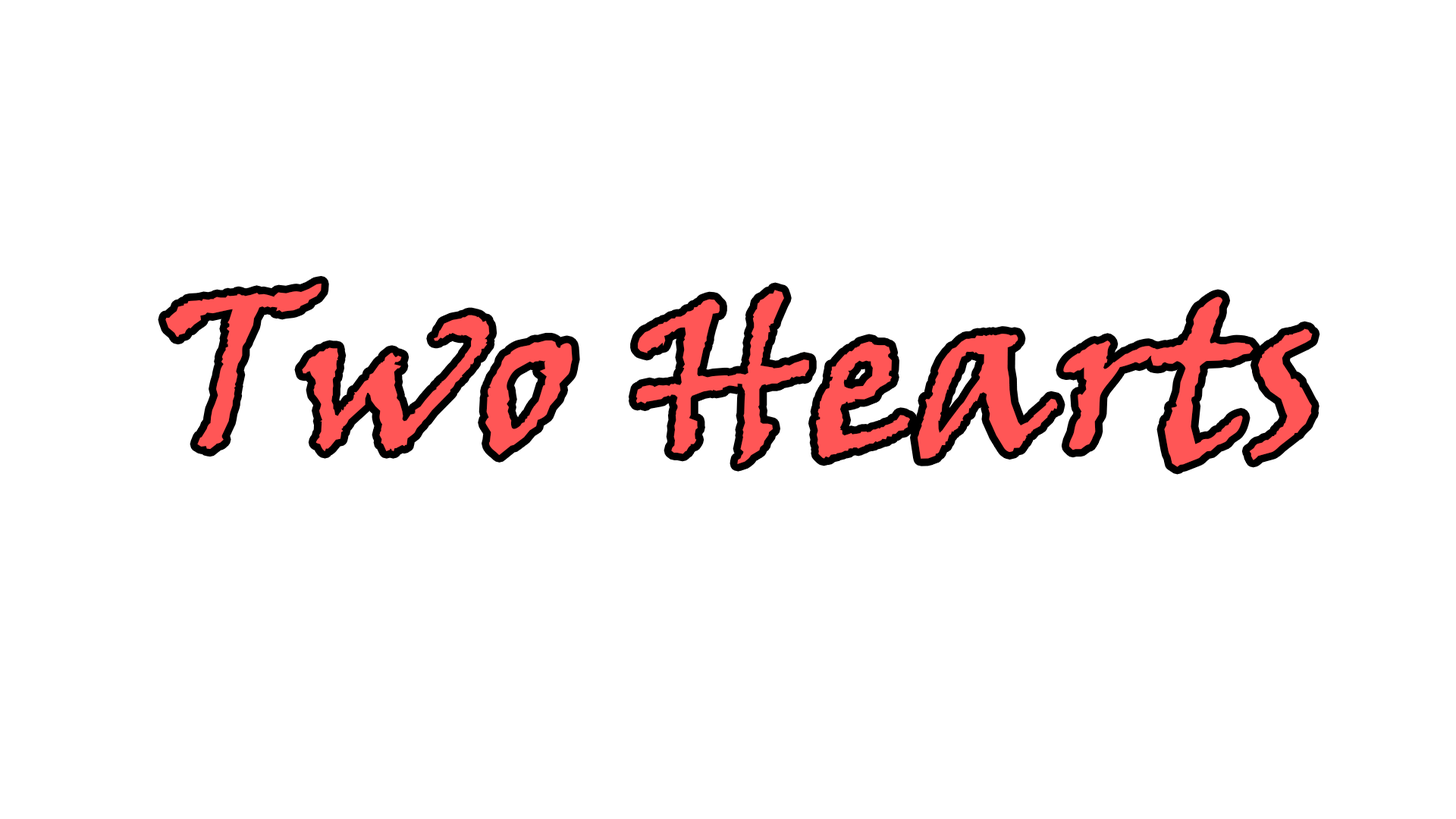
<style>
.page{position:relative;width:1456px;height:819px;background:#ffffff}
.page>*{position:absolute;margin:0}
.t1{font:227.5px "VinerHandITC";color:#ff5656}
</style>
<div class="page">
<p class="t1" style="left:165px;top:283px;width:1148px;height:184px">Two Hearts</p>
</div>
